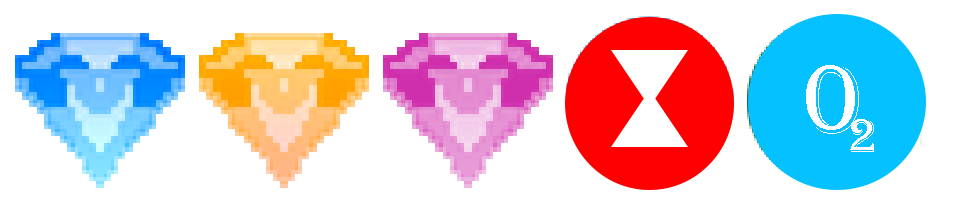
<style>
.page{position:relative;width:953px;height:203px;background:#ffffff}
.page>*{position:absolute;margin:0}
.t1{font:100px "Algerian";color:#ffffff}
.t2{font:50px "Algerian";color:#ffffff}
</style>
<div class="page">
<p class="t1" style="left:806px;top:65px;width:53px;height:69px">0</p>
<p class="t2" style="left:850px;top:119px;width:24px;height:33px">2</p>
</div>
